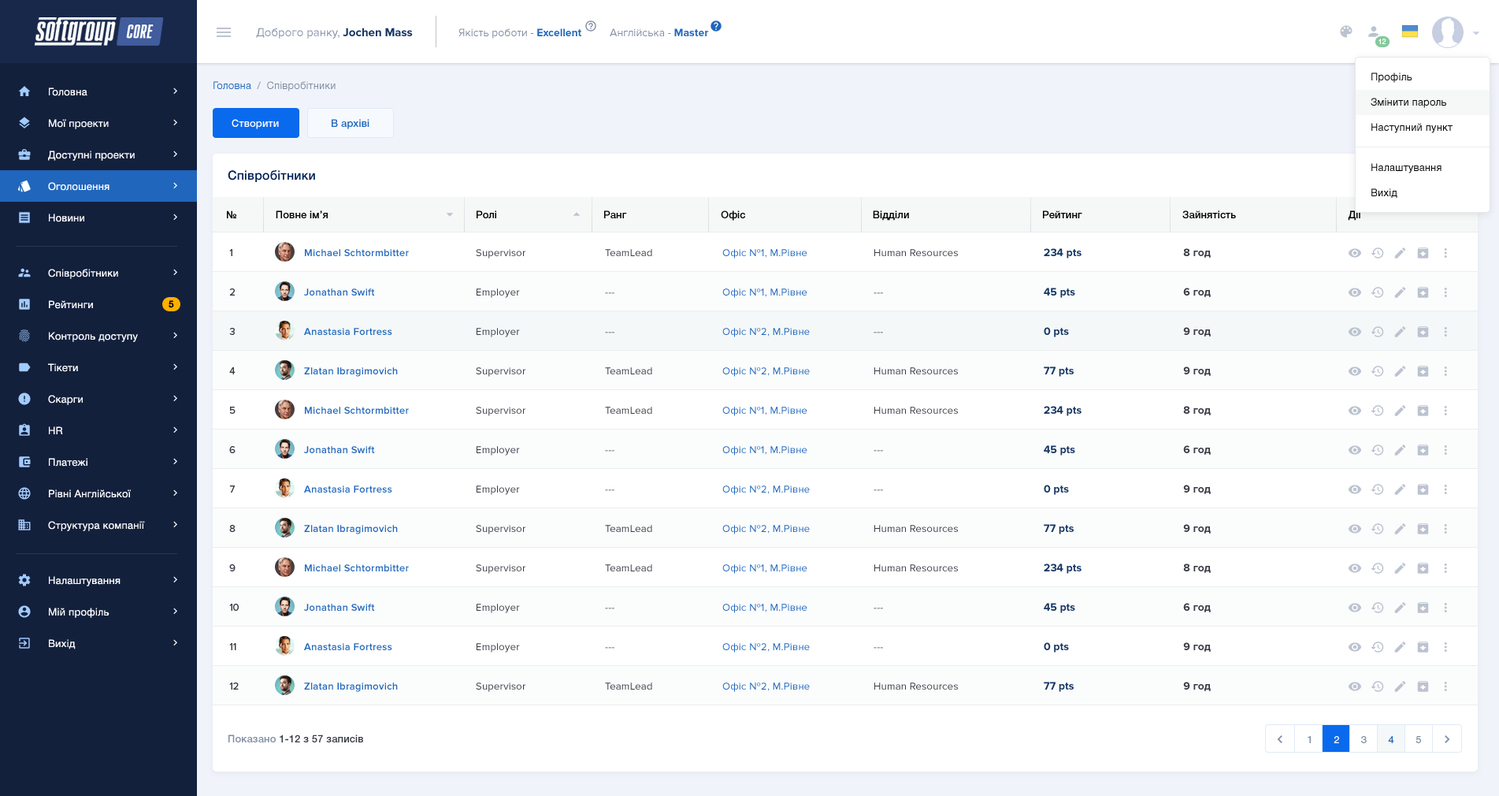
<style>
.page{position:relative;width:1499px;height:796px;background:#ffffff}
.page>*{position:absolute;margin:0}
.t1{font:11.8px "ProximaNova-Regular";color:#7f8ca2}
.t2{font:11.8px "ProximaNova-Bold";color:#173765}
.t3{font:11px "ProximaNova-Regular";color:#7f8ca2}
.t4{font:11px "ProximaNova-Bold";color:#2066bc}
.t5{font:7.1px "HelveticaNeueCyr-Roman";letter-spacing:0.02em;color:#ffffff}
.t6{font:10.2px/25.2px "HelveticaNeueCyr-Roman";letter-spacing:0.01em;color:#000000}
.t7{font:10.2px/19.7px "HelveticaNeueCyr-Roman";letter-spacing:0.02em;color:#ffffff}
.t8{font:10.2px "HelveticaNeueCyr-Roman";letter-spacing:0.01em;color:#7f8ca2}
.t9{font:10.2px "HelveticaNeueCyr-Roman";letter-spacing:0.01em;color:#2066bc}
.t10{font:10.2px "HelveticaNeueCyr-Medium";letter-spacing:0.01em;color:#ffffff}
.t11{font:10.2px "HelveticaNeueCyr-Medium";letter-spacing:0.01em;color:#2066bc}
.t12{font:12.6px "HelveticaNeueCyr-Medium";letter-spacing:0.01em;color:#002157}
.t13{font:10.2px "HelveticaNeueCyr-Medium";letter-spacing:0.01em;color:#000000}
.t14{font:10.2px "ProximaNova-Regular";color:#393b45}
.t15{font:10.2px "ProximaNova-Semibold";letter-spacing:0.02em;color:#2066bc}
.t16{font:10.2px "ProximaNova-Regular";letter-spacing:0.02em;color:#393b45}
.t17{font:10.2px "ProximaNova-Regular";letter-spacing:0.02em;color:#2066bc}
.t18{font:11px "ProximaNova-Bold";color:#173765}
.t19{font:11px "ProximaNova-Bold";color:#393b45}
.t20{font:10.2px "ProximaNova-Regular";letter-spacing:0.02em}
.t21{font:9.5px "HelveticaNeueCyr-Medium";letter-spacing:0.02em;color:#000000}
.t22{font:10.2px "HelveticaNeueCyr-Medium";letter-spacing:0.01em;color:#393b45}
.t23{font:10.2px "HelveticaNeueCyr-Medium";letter-spacing:0.01em;color:#7f8ca2}
.t24{font:10.2px "HelveticaNeueCyr-Roman";letter-spacing:2.1em;color:#7f8ca2}
.t25{font:10.2px "HelveticaNeueCyr-Roman";letter-spacing:2.1em;color:#ffffff}
.t26{font:10.2px "HelveticaNeueCyr-Roman";letter-spacing:2.1em;color:#2066bc}
</style>
<div class="page">
<p class="t1" style="left:256px;top:28px;width:157px;height:11px">Доброго ранку, <span class="t2">Jochen Mass</span></p>
<p class="t3" style="left:458px;top:28px;width:251px;height:11px">Якість роботи - <span class="t4">Excellent          </span>Англійська - <span class="t4">Master</span></p>
<p class="t5" style="left:1378px;top:39px;width:8px;height:5px">12</p>
<p class="t6" style="left:1371px;top:72px;width:81px;height:61px">Профіль<br>Змінити пароль<br>Наступний пункт</p>
<p class="t7" style="left:48px;top:87px;width:87px;height:135px">Головна<br>Мої проекти<br>Доступні проекти<br>Оголошення<br>Новини</p>
<p class="t8" style="left:213px;top:81px;width:123px;height:10px"><span class="t9">Головна  </span>/  Співробітники</p>
<p class="t10" style="left:232px;top:119px;width:47px;height:10px">Створити</p>
<p class="t11" style="left:332px;top:119px;width:37px;height:10px">В архіві</p>
<p class="t12" style="left:228px;top:170px;width:87px;height:12px">Співробітники</p>
<p class="t6" style="left:1371px;top:163px;width:70px;height:35px">Налаштування<br>Вихід</p>
<p class="t13" style="left:227px;top:210px;width:1134px;height:11px">№             Повне ім’я                                                  Ролі                                    Ранг                                Офіс                                           Відділи                                             Рейтинг                                  Зайнятість                                      Дії</p>
<p class="t14" style="left:229px;top:249px;width:3px;height:7px">1</p>
<p class="t15" style="left:305px;top:249px;width:104px;height:7px">Michael Schtormbitter</p>
<p class="t16" style="left:476px;top:249px;width:49px;height:9px">Supervisor</p>
<p class="t16" style="left:605px;top:249px;width:47px;height:7px">TeamLead</p>
<p class="t17" style="left:722px;top:249px;width:85px;height:9px">Офіс №1, М.Рівне</p>
<p class="t16" style="left:874px;top:249px;width:84px;height:7px">Human Resources</p>
<p class="t18" style="left:1044px;top:248px;width:37px;height:10px">234 pts</p>
<p class="t19" style="left:1183px;top:248px;width:28px;height:10px">8 год</p>
<p class="t7" style="left:48px;top:269px;width:97px;height:262px">Співробітники<br>Рейтинги<br>Контроль доступу<br>Тікети<br>Скарги<br>HR<br>Платежі<br>Рівні Англійської<br>Структура компанії</p>
<p class="t14" style="left:229px;top:288px;width:6px;height:7px">2</p>
<p class="t15" style="left:304px;top:288px;width:71px;height:7px">Jonathan Swift</p>
<p class="t16" style="left:477px;top:288px;width:43px;height:10px">Employer</p>
<p class="t20" style="left:605px;top:292px;width:9px;height:2px">---</p>
<p class="t17" style="left:722px;top:288px;width:85px;height:10px">Офіс №1, М.Рівне</p>
<p class="t20" style="left:874px;top:292px;width:9px;height:2px">---</p>
<p class="t18" style="left:1044px;top:287px;width:31px;height:11px">45 pts</p>
<p class="t19" style="left:1183px;top:287px;width:28px;height:10px">6 год</p>
<p class="t21" style="left:169px;top:300px;width:5px;height:8px">5</p>
<p class="t14" style="left:229px;top:328px;width:6px;height:7px">3</p>
<p class="t15" style="left:304px;top:328px;width:88px;height:7px">Anastasia Fortress</p>
<p class="t16" style="left:477px;top:328px;width:43px;height:9px">Employer</p>
<p class="t17" style="left:722px;top:328px;width:88px;height:9px">Офіс №2, М.Рівне</p>
<p class="t18" style="left:1044px;top:327px;width:25px;height:10px">0 pts</p>
<p class="t19" style="left:1183px;top:327px;width:28px;height:9px">9 год</p>
<p class="t20" style="left:605px;top:332px;width:9px;height:1px">---</p>
<p class="t20" style="left:874px;top:332px;width:9px;height:1px">---</p>
<p class="t14" style="left:229px;top:367px;width:7px;height:7px">4</p>
<p class="t15" style="left:304px;top:367px;width:94px;height:9px">Zlatan Ibragimovich</p>
<p class="t16" style="left:476px;top:367px;width:49px;height:9px">Supervisor</p>
<p class="t16" style="left:605px;top:367px;width:47px;height:7px">TeamLead</p>
<p class="t17" style="left:722px;top:367px;width:88px;height:9px">Офіс №2, М.Рівне</p>
<p class="t16" style="left:874px;top:367px;width:84px;height:7px">Human Resources</p>
<p class="t18" style="left:1044px;top:366px;width:30px;height:10px">77 pts</p>
<p class="t19" style="left:1183px;top:366px;width:28px;height:10px">9 год</p>
<p class="t7" style="left:49px;top:576px;width:72px;height:73px">Налаштування<br>Мій профіль<br>Вихід</p>
<p class="t22" style="left:228px;top:734px;width:135px;height:8px"><span class="t23">Показано </span>1-12 з 57 записів</p>
<p class="t24" style="left:1308px;top:736px;width:113px;height:7px">1<span class="t25">2</span>3<span class="t26">4</span>5</p>
</div>
